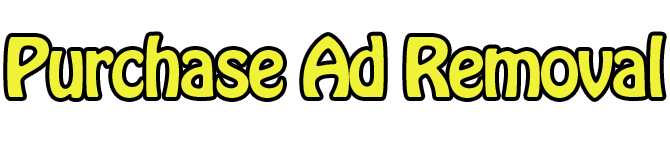
<style>
.page{position:relative;width:670px;height:144px;background:#ffffff}
.page>*{position:absolute;margin:0}
.t1{font:72px "HoboStd";letter-spacing:-0.04em;color:#f0f237}
</style>
<div class="page">
<p class="t1" style="left:7px;top:35px;width:656px;height:63px">Purchase Ad Removal</p>
</div>
